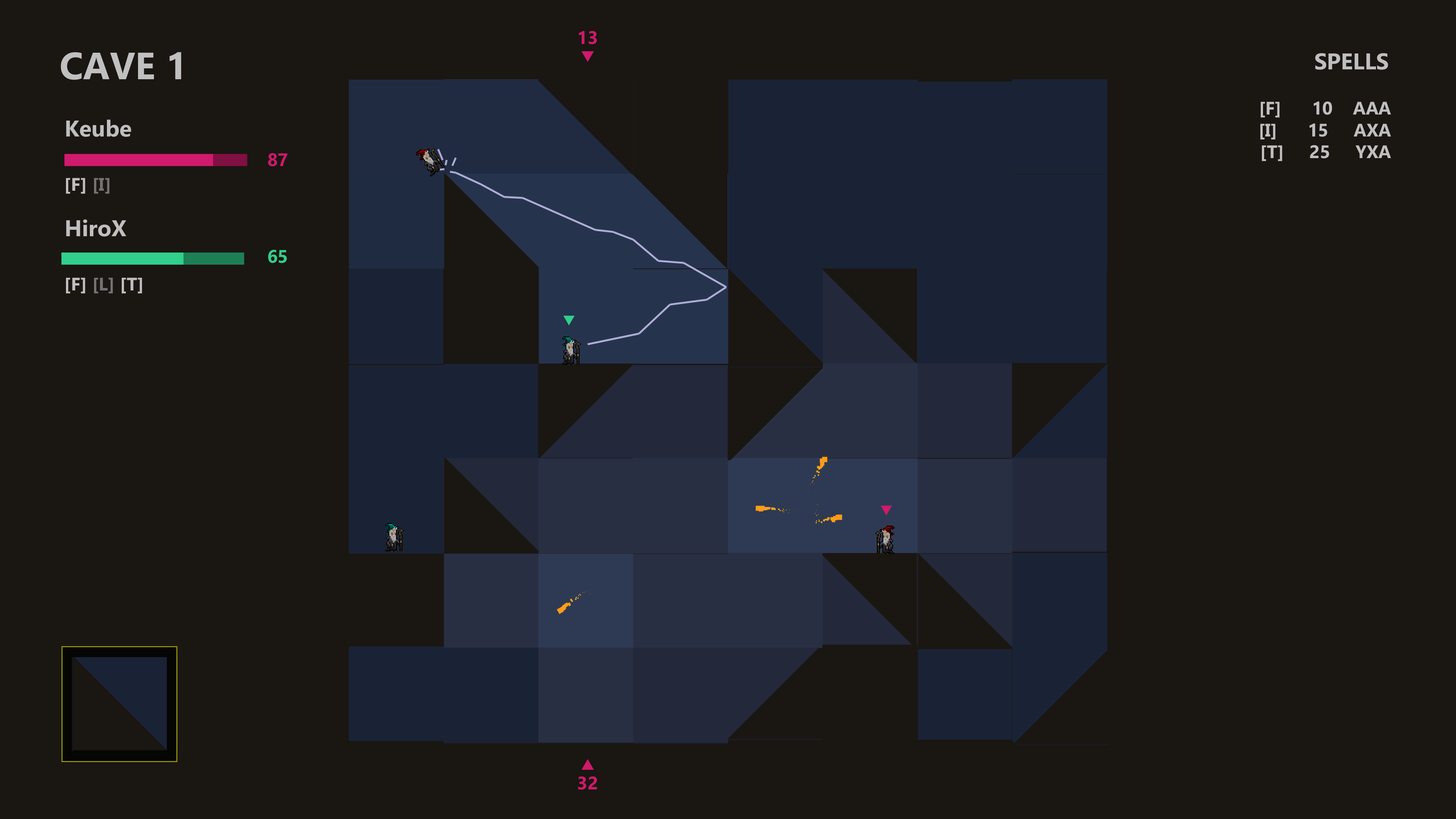
<style>
.page{position:relative;width:1456px;height:819px;background:#1a1612}
.page>*{position:absolute;margin:0}
.t1{font:18.2px "Ebrima-Bold";color:#cf196b}
.t2{font:37.9px "Ebrima-Bold";color:#c0c0c0}
.t3{font:22.7px "Ebrima-Bold";color:#bfbfbf}
.t4{font:18.2px "Ebrima-Bold";color:#bfbfbf}
.t5{font:18.2px "Ebrima-Bold";color:#737373}
.t6{font:18.2px "Ebrima-Bold";color:#31cf8b}
</style>
<div class="page">
<p class="t1" style="left:579px;top:31px;width:18px;height:13px">13</p>
<p class="t2" style="left:61px;top:52px;width:120px;height:28px">CAVE 1</p>
<p class="t3" style="left:1315px;top:53px;width:73px;height:17px">SPELLS</p>
<p class="t4" style="left:1260px;top:101px;width:131px;height:60px;text-align:right">[F]      10    AAA<br>[I]      15     AXA<br>  [T]     25     YXA</p>
<p class="t3" style="left:66px;top:119px;width:65px;height:18px">Keube</p>
<p class="t1" style="left:268px;top:153px;width:19px;height:13px">87</p>
<p class="t4" style="left:66px;top:178px;width:44px;height:16px">[F] <span class="t5">[I]</span></p>
<p class="t3" style="left:66px;top:219px;width:60px;height:18px">HiroX</p>
<p class="t6" style="left:268px;top:249px;width:19px;height:14px">65</p>
<p class="t4" style="left:66px;top:278px;width:76px;height:15px">[F] <span class="t5">[L]</span> [T]</p>
<p class="t1" style="left:578px;top:776px;width:19px;height:14px">32</p>
</div>
